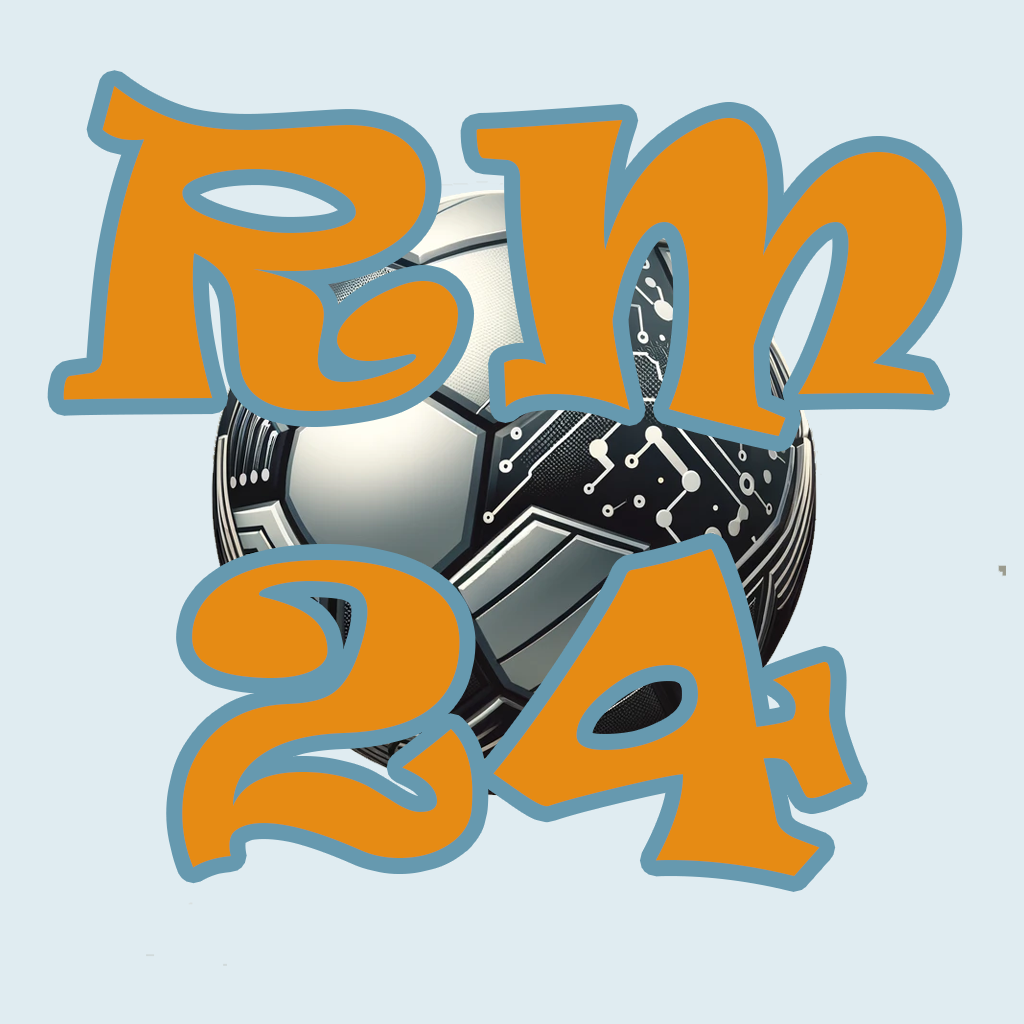
<style>
.page{position:relative;width:1024px;height:1024px;background:#e0ecf1}
.page>*{position:absolute;margin:0}
.t1{font:374.4px "Ravie";letter-spacing:0.05em;color:#e68b14}
</style>
<div class="page">
<p class="t1" style="left:63px;top:86px;width:884px;height:790px;text-align:center">RM<br>24</p>
</div>
